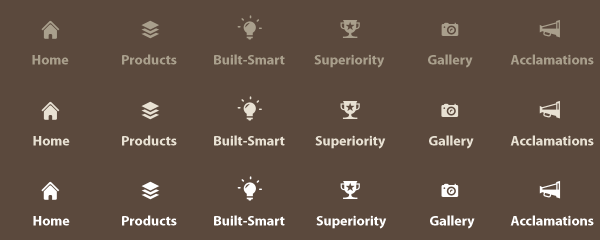
<style>
.page{position:relative;width:600px;height:240px;background:#5b493d}
.page>*{position:absolute;margin:0}
.t1{font:14px "MyriadPro-Bold";color:#a99f8c}
.t2{font:14px "MyriadPro-Bold";color:#e8e1d3}
.t3{font:14px "MyriadPro-Bold";color:#ffffff}
</style>
<div class="page">
<p class="t1" style="left:122px;top:54px;width:55px;height:11px">Products</p>
<p class="t1" style="left:214px;top:54px;width:71px;height:11px">Built-Smart</p>
<p class="t1" style="left:314px;top:54px;width:71px;height:14px">Superiority</p>
<p class="t1" style="left:428px;top:54px;width:45px;height:14px">Gallery</p>
<p class="t1" style="left:510px;top:54px;width:84px;height:11px">Acclamations</p>
<p class="t1" style="left:32px;top:55px;width:37px;height:10px">Home</p>
<p class="t2" style="left:33px;top:136px;width:37px;height:10px">Home</p>
<p class="t2" style="left:122px;top:135px;width:55px;height:11px">Products</p>
<p class="t2" style="left:214px;top:135px;width:71px;height:11px">Built-Smart</p>
<p class="t2" style="left:315px;top:135px;width:71px;height:14px">Superiority</p>
<p class="t2" style="left:429px;top:135px;width:45px;height:14px">Gallery</p>
<p class="t2" style="left:510px;top:135px;width:84px;height:11px">Acclamations</p>
<p class="t3" style="left:33px;top:216px;width:37px;height:10px">Home</p>
<p class="t3" style="left:122px;top:215px;width:55px;height:11px">Products</p>
<p class="t3" style="left:214px;top:215px;width:71px;height:11px">Built-Smart</p>
<p class="t3" style="left:316px;top:215px;width:71px;height:14px">Superiority</p>
<p class="t3" style="left:430px;top:215px;width:45px;height:14px">Gallery</p>
<p class="t3" style="left:510px;top:215px;width:84px;height:11px">Acclamations</p>
</div>
